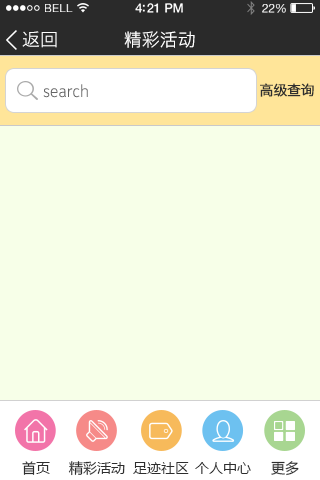
<style>
.page{position:relative;width:320px;height:480px;background:#f7ffe8}
.page>*{position:absolute;margin:0}
.t1{font:11.9px "HelveticaNeue";letter-spacing:0.02em;color:#ffffff;scale:0.97 1}
.t2{font:13px "HelveticaNeue-Medium";letter-spacing:-0.02em;color:#ffffff;scale:0.97 1}
.t3{font:12.4px "HelveticaNeue";letter-spacing:-0.02em;color:#ffffff;scale:0.97 1}
.t4{font:18px "HiraginoSansGB-W3";color:#ffffff}
.t5{font:18px "STHeitiSC-Light";color:#ffffff}
.t6{font:16px "STHeitiSC-Light";color:#646464}
.t7{font:14px "STHeitiSC-Light";letter-spacing:-0.05em;color:#2f2f2f;font-weight:bold}
.t8{font:14px "MicrosoftYaHei";color:#2d2d2d}
</style>
<div class="page">
<p class="t1" style="left:45px;top:4px;width:28px;height:8px">BELL</p>
<p class="t2" style="left:135px;top:3px;width:48px;height:10px">4:21 PM</p>
<p class="t3" style="left:262px;top:4px;width:24px;height:9px">22%</p>
<p class="t4" style="left:22px;top:31px;width:35px;height:17px">返回</p>
<p class="t5" style="left:124px;top:31px;width:71px;height:17px">精彩活动</p>
<p class="t6" style="left:43px;top:84px;width:45px;height:14px">search</p>
<p class="t7" style="left:260px;top:83px;width:54px;height:14px">高级查询</p>
<p class="t8" style="left:22px;top:461px;width:28px;height:14px">首页</p>
<p class="t8" style="left:68px;top:461px;width:57px;height:15px">精彩活动</p>
<p class="t8" style="left:133px;top:462px;width:56px;height:12px">足迹社区</p>
<p class="t8" style="left:195px;top:462px;width:56px;height:12px">个人中心</p>
<p class="t8" style="left:271px;top:461px;width:28px;height:15px">更多</p>
</div>
